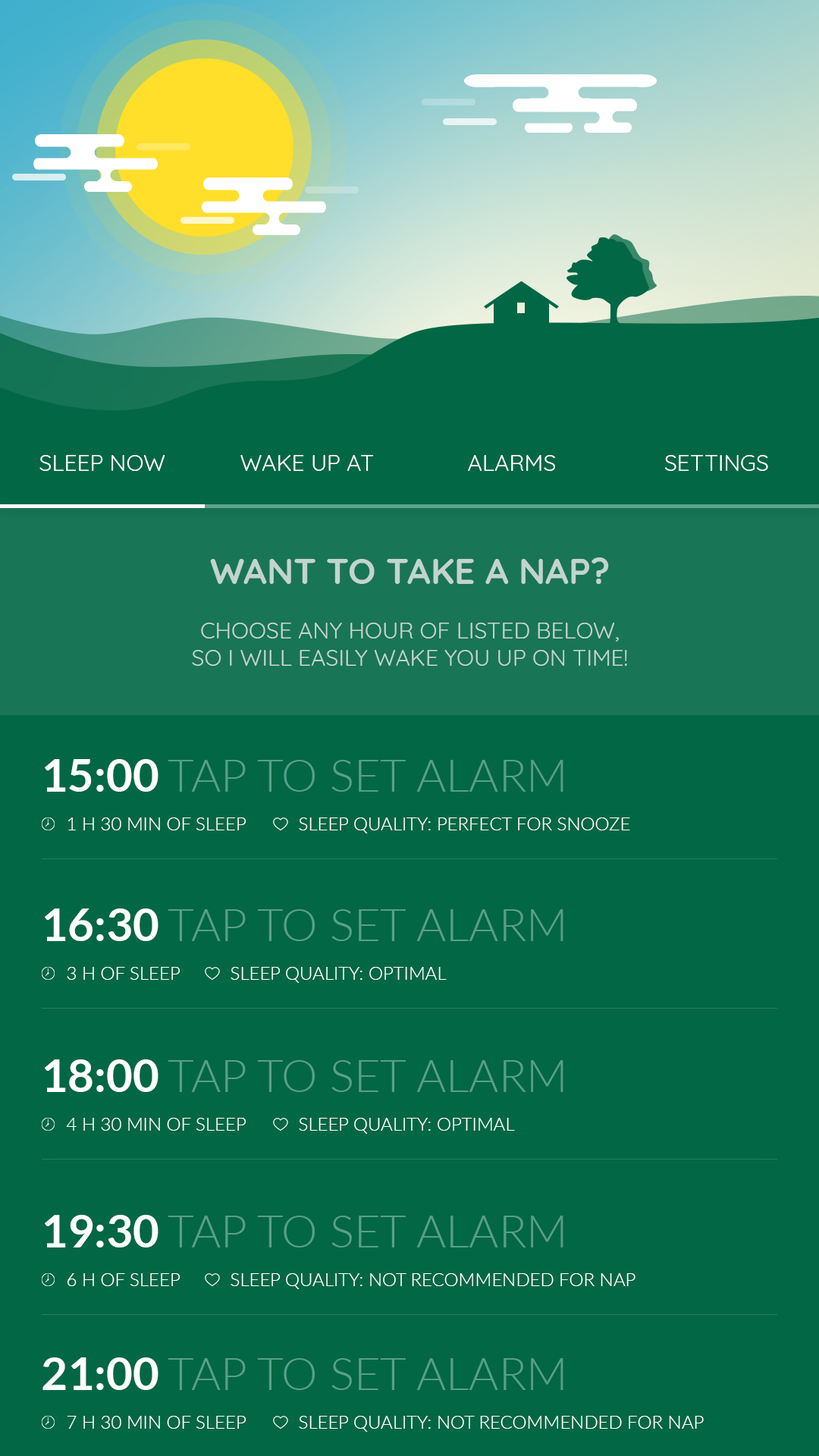
<style>
.page{position:relative;width:819px;height:1456px;background:#026744}
.page>*{position:absolute;margin:0}
.t1{font:22.7px "Quicksand-Regular";color:#ffffff}
.t2{font:22.7px "Quicksand-Regular";color:#c2d4cd;text-transform:uppercase}
.t3{font:36.4px "Quicksand-Bold";color:#c2d4cd;text-transform:uppercase}
.t4{font:45.5px "Lato-Light";color:#589f8b;text-transform:uppercase}
.t5{font:45.5px "Lato-Bold";color:#ffffff;text-transform:uppercase}
.t6{font:18.2px "Lato-Light";color:#ffffff;text-transform:uppercase}
</style>
<div class="page">
<p class="t1" style="left:39px;top:455px;width:126px;height:16px">SLEEP NOW</p>
<p class="t1" style="left:240px;top:455px;width:134px;height:16px">WAKE UP AT</p>
<p class="t1" style="left:468px;top:455px;width:87px;height:16px">ALARMS</p>
<p class="t1" style="left:665px;top:455px;width:103px;height:16px">SETTINGS</p>
<p class="t2" style="left:192px;top:557px;width:435px;height:109px;text-align:center"><span class="t3">Want to take a nap?<br></span><br>choose any hour of listed below,<br>so I will easily wake you up on time!</p>
<p class="t4" style="left:45px;top:759px;width:518px;height:33px"><span class="t5">15:00 </span>TAP TO SET ALARM</p>
<p class="t6" style="left:67px;top:817px;width:179px;height:13px">1 H 30 MIN of sleep</p>
<p class="t6" style="left:299px;top:817px;width:331px;height:16px">SLEEP QUALITY: perfect for snooze</p>
<p class="t4" style="left:45px;top:908px;width:518px;height:33px"><span class="t5">16:30 </span>TAP TO SET ALARM</p>
<p class="t6" style="left:67px;top:967px;width:113px;height:13px">3 h of sleep</p>
<p class="t6" style="left:231px;top:967px;width:216px;height:16px">SLEEP QUALITY: OPTIMAL</p>
<p class="t4" style="left:45px;top:1059px;width:518px;height:33px"><span class="t5">18:00 </span>TAP TO SET ALARM</p>
<p class="t6" style="left:66px;top:1118px;width:180px;height:13px">4 h 30 min of sleep</p>
<p class="t6" style="left:299px;top:1118px;width:216px;height:16px">SLEEP QUALITY: OPTIMAL</p>
<p class="t4" style="left:45px;top:1215px;width:518px;height:32px"><span class="t5">19:30 </span>TAP TO SET ALARM</p>
<p class="t6" style="left:67px;top:1273px;width:113px;height:13px">6 h of sleep</p>
<p class="t6" style="left:231px;top:1273px;width:404px;height:16px">SLEEP QUALITY: Not recommended for nap</p>
<p class="t4" style="left:42px;top:1357px;width:521px;height:33px"><span class="t5">21:00 </span>TAP TO SET ALARM</p>
<p class="t6" style="left:67px;top:1416px;width:179px;height:13px">7 H 30 min of sleep</p>
<p class="t6" style="left:299px;top:1416px;width:405px;height:16px">SLEEP QUALITY: Not recommended for nap</p>
</div>
